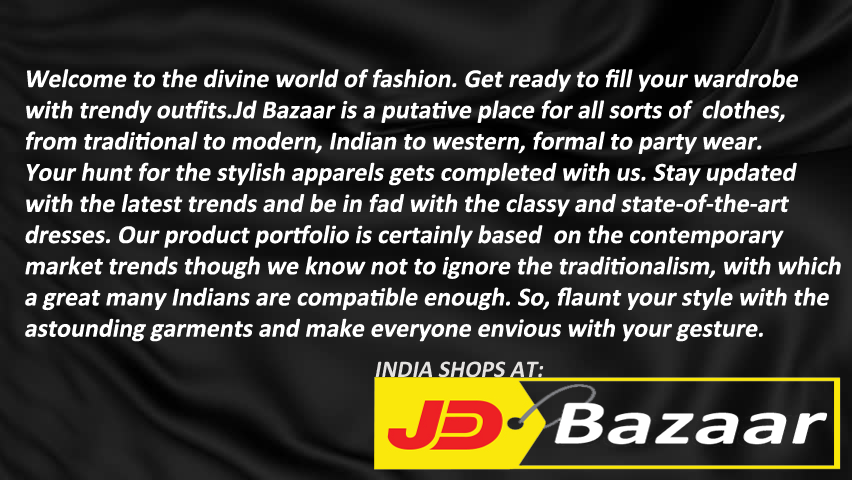
<style>
.page{position:relative;width:852px;height:480px}
.page>*{position:absolute;margin:0}
.t1{font:26px "Calibri-Bold";color:#ffffff;font-style:italic}
.t2{font:24px "Calibri-Bold";color:#e4e2e0;font-style:italic}
</style>
<div class="page">
<p class="t1" style="left:25px;top:69px;width:816px;height:273px">Welcome to the divine world of fashion. Get ready to fill your wardrobe <br>with trendy outfits.Jd Bazaar is a putative place for all sorts of  clothes,<br>from traditional to modern, Indian to western, formal to party wear. <br>Your hunt for the stylish apparels gets completed with us. Stay updated <br>with the latest trends and be in fad with the classy and state-of-the-art <br>dresses. Our product portfolio is certainly based  on the contemporary <br>market trends though we know not to ignore the traditionalism, with which <br>a great many Indians are compatible enough. So, flaunt your style with the <br>astounding garments and make everyone envious with your gesture.</p>
<p class="t2" style="left:375px;top:361px;width:169px;height:17px">INDIA SHOPS AT:</p>
</div>
